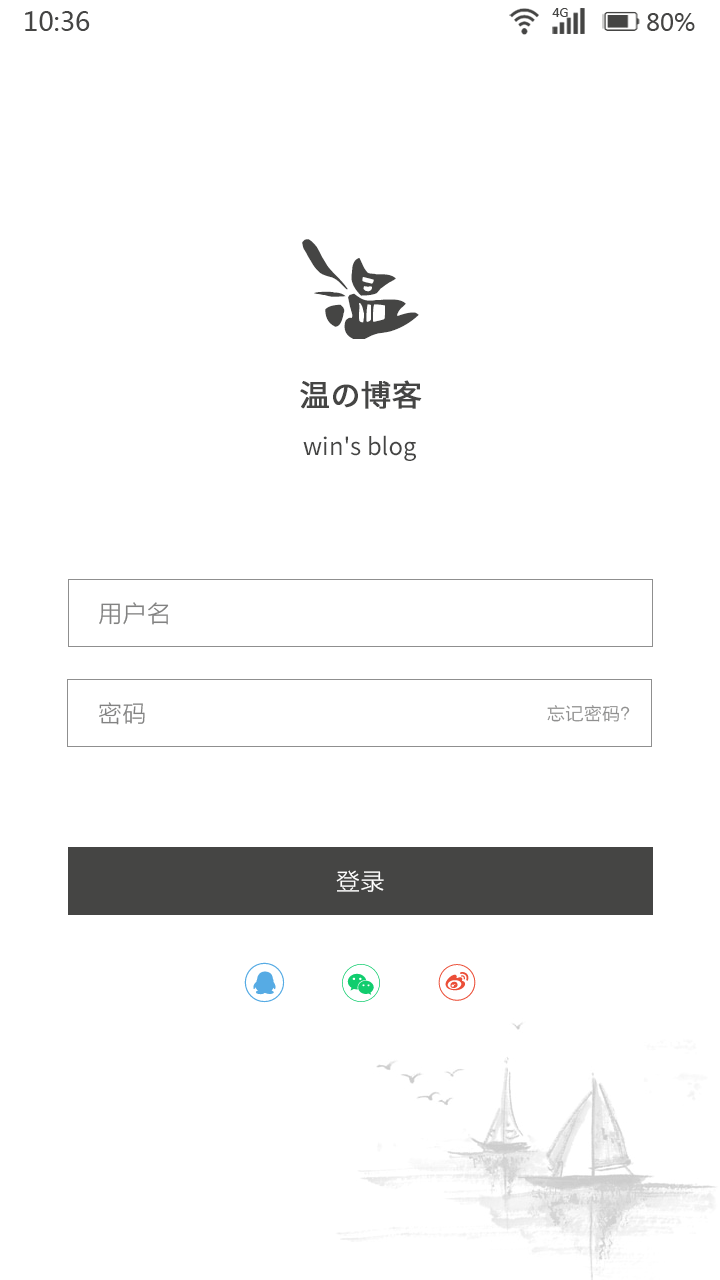
<style>
.page{position:relative;width:720px;height:1280px;background:#ffffff}
.page>*{position:absolute;margin:0}
.t1{font:26px "MicrosoftYaHei";color:#454544}
.t2{font:12px "MicrosoftYaHei";color:#454544}
.t3{font:24px "MicrosoftYaHei";color:#454544}
.t4{font:150px "ShiansaEG-Medium-GB";color:#454544}
.t5{font:30px "SourceHanSansCN-Regular";color:#454544;font-weight:bold}
.t6{font:24px "SourceHanSansCN-Regular";color:#454544}
.t7{font:24px "FZLTXHK";letter-spacing:0.025em;color:#828282}
.t8{font:18px "FZLTXHK";letter-spacing:0.025em;color:#8f8f8f}
.t9{font:24px "FZLTXHK";letter-spacing:0.025em;color:#ffffff}
</style>
<div class="page">
<p class="t1" style="left:25px;top:11px;width:65px;height:20px">10:36</p>
<p class="t2" style="left:552px;top:8px;width:16px;height:9px">4G</p>
<p class="t3" style="left:647px;top:13px;width:48px;height:18px">80%</p>
<p class="t4" style="left:302px;top:239px;width:117px;height:100px">温</p>
<p class="t5" style="left:300px;top:380px;width:122px;height:29px">温の博客</p>
<p class="t6" style="left:303px;top:435px;width:113px;height:26px">win's blog</p>
<p class="t7" style="left:99px;top:602px;width:70px;height:23px">用户名</p>
<p class="t7" style="left:99px;top:702px;width:46px;height:23px">密码</p>
<p class="t8" style="left:547px;top:705px;width:83px;height:17px">忘记密码？</p>
<p class="t9" style="left:336px;top:870px;width:48px;height:22px">登录</p>
</div>
